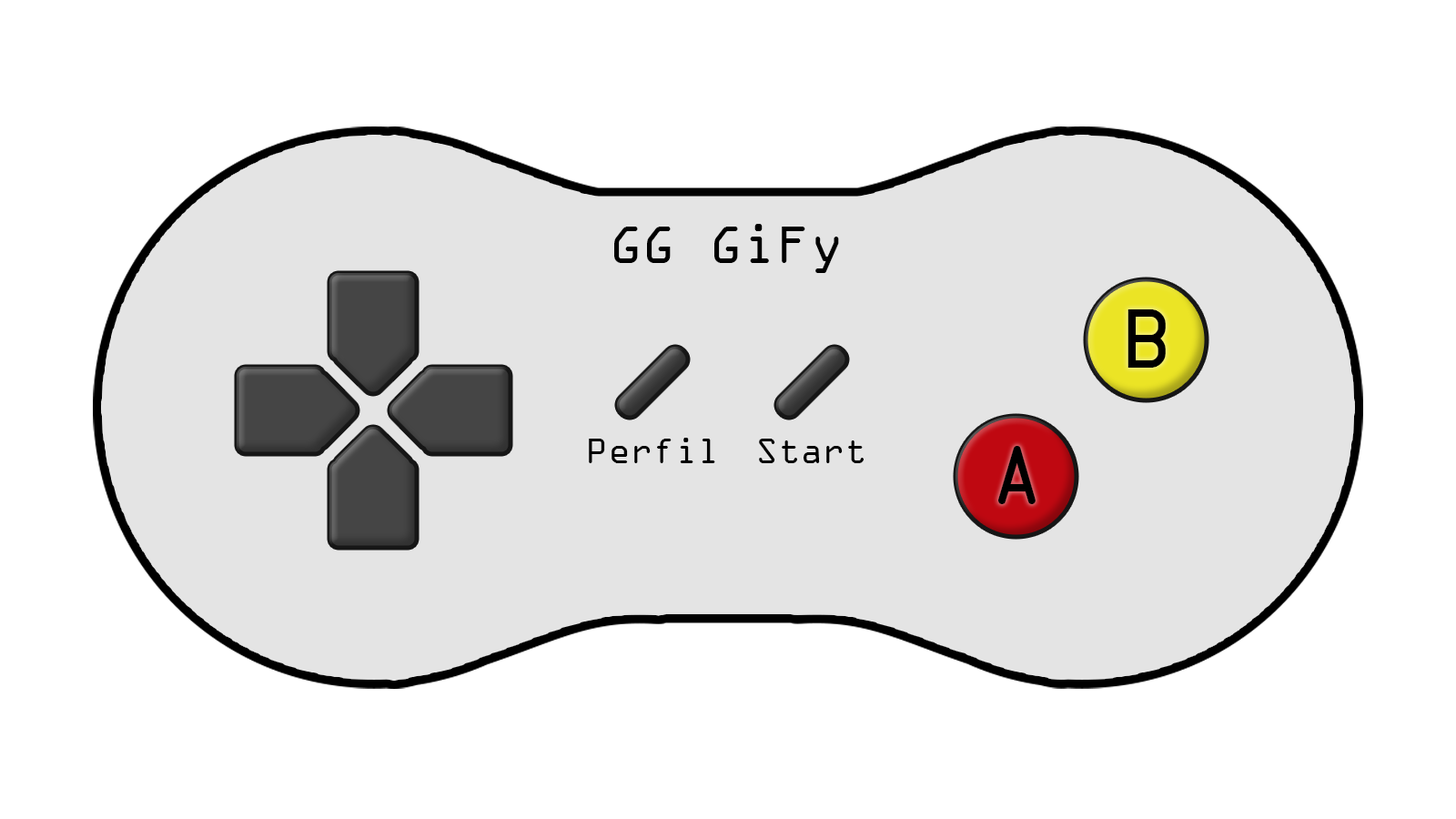
<style>
.page{position:relative;width:1456px;height:819px;background:#ffffff}
.page>*{position:absolute;margin:0}
.t1{font:55.5px "OCRAExtended";color:#000000}
.t2{font:90.1px "OCRAExtended";color:#000000}
.t3{font:37px "OCRAExtended";color:#000000}
</style>
<div class="page">
<p class="t1" style="left:614px;top:224px;width:225px;height:49px">GG GiFy</p>
<p class="t2" style="left:1127px;top:309px;width:39px;height:59px">B</p>
<p class="t3" style="left:589px;top:438px;width:126px;height:25px">Perfil</p>
<p class="t3" style="left:759px;top:439px;width:105px;height:24px">Start</p>
<p class="t2" style="left:998px;top:446px;width:38px;height:58px">A</p>
</div>
